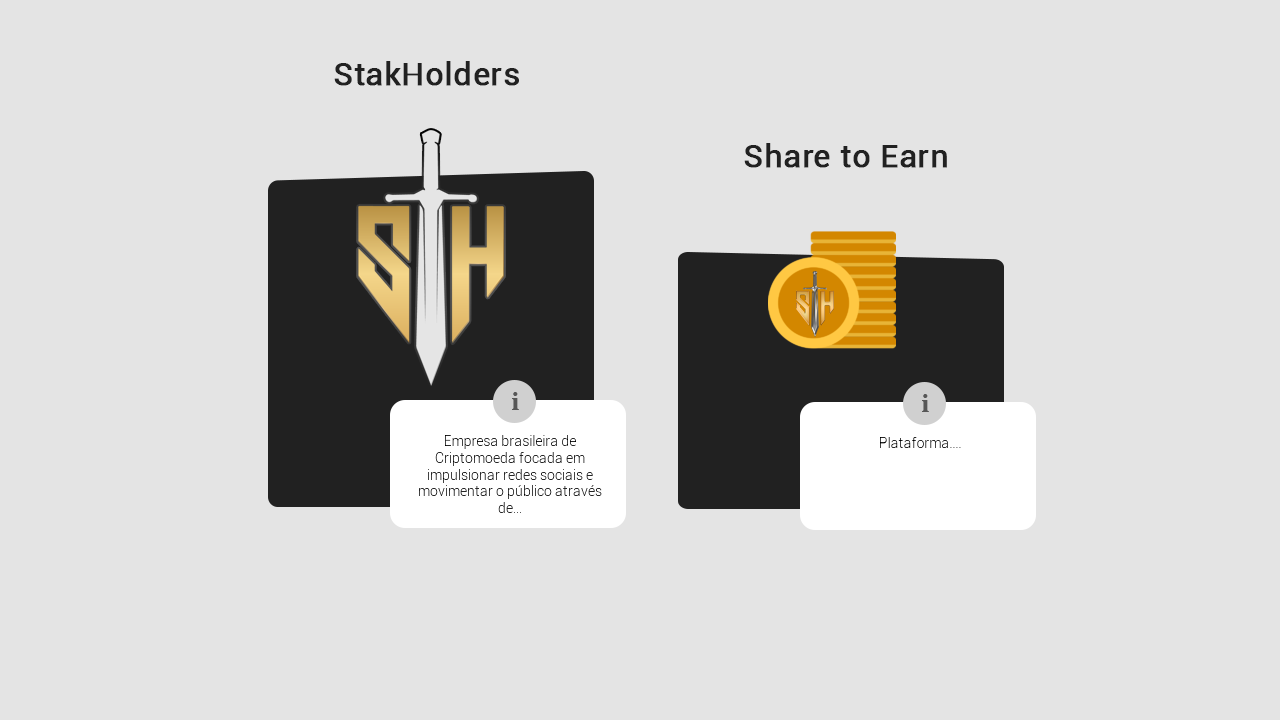
<style>
.page{position:relative;width:1280px;height:720px;background:#e4e4e4}
.page>*{position:absolute;margin:0}
.t1{font:32px "Roboto-Regular";color:#212121;font-weight:bold}
.t2{font:26.7px "TimesNewRomanPS-BoldMT";color:#575757}
.t3{font:14px "Roboto-Light";color:#000000}
</style>
<div class="page">
<p class="t1" style="left:334px;top:61px;width:185px;height:25px">StakHolders</p>
<p class="t1" style="left:744px;top:143px;width:203px;height:25px">Share to Earn</p>
<p class="t2" style="left:512px;top:392px;width:7px;height:18px">i</p>
<p class="t2" style="left:922px;top:394px;width:7px;height:18px">i</p>
<p class="t3" style="left:419px;top:435px;width:183px;height:78px;text-align:center">Empresa brasileira de<br>Criptomoeda focada em<br>impulsionar redes sociais e<br>movimentar o público através<br>de...</p>
<p class="t3" style="left:880px;top:437px;width:81px;height:11px">Plataforma....</p>
</div>
